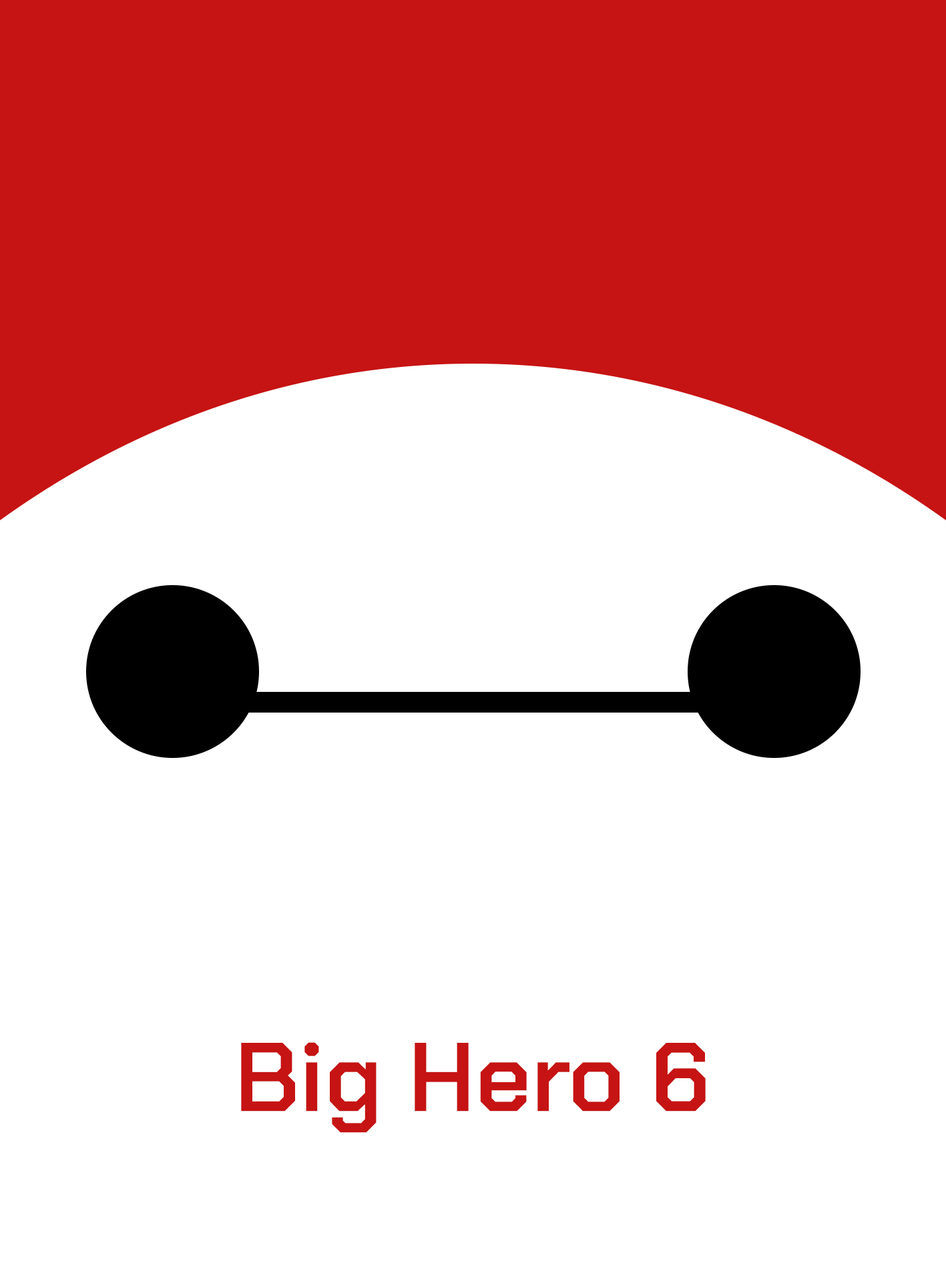
<style>
.page{position:relative;width:946px;height:1261px;background:#ffffff}
.page>*{position:absolute;margin:0}
.t1{font:97.3px "ChakraPetch-SemiBold";color:#c61313}
</style>
<div class="page">
<p class="t1" style="left:241px;top:1042px;width:464px;height:91px">Big Hero 6</p>
</div>
